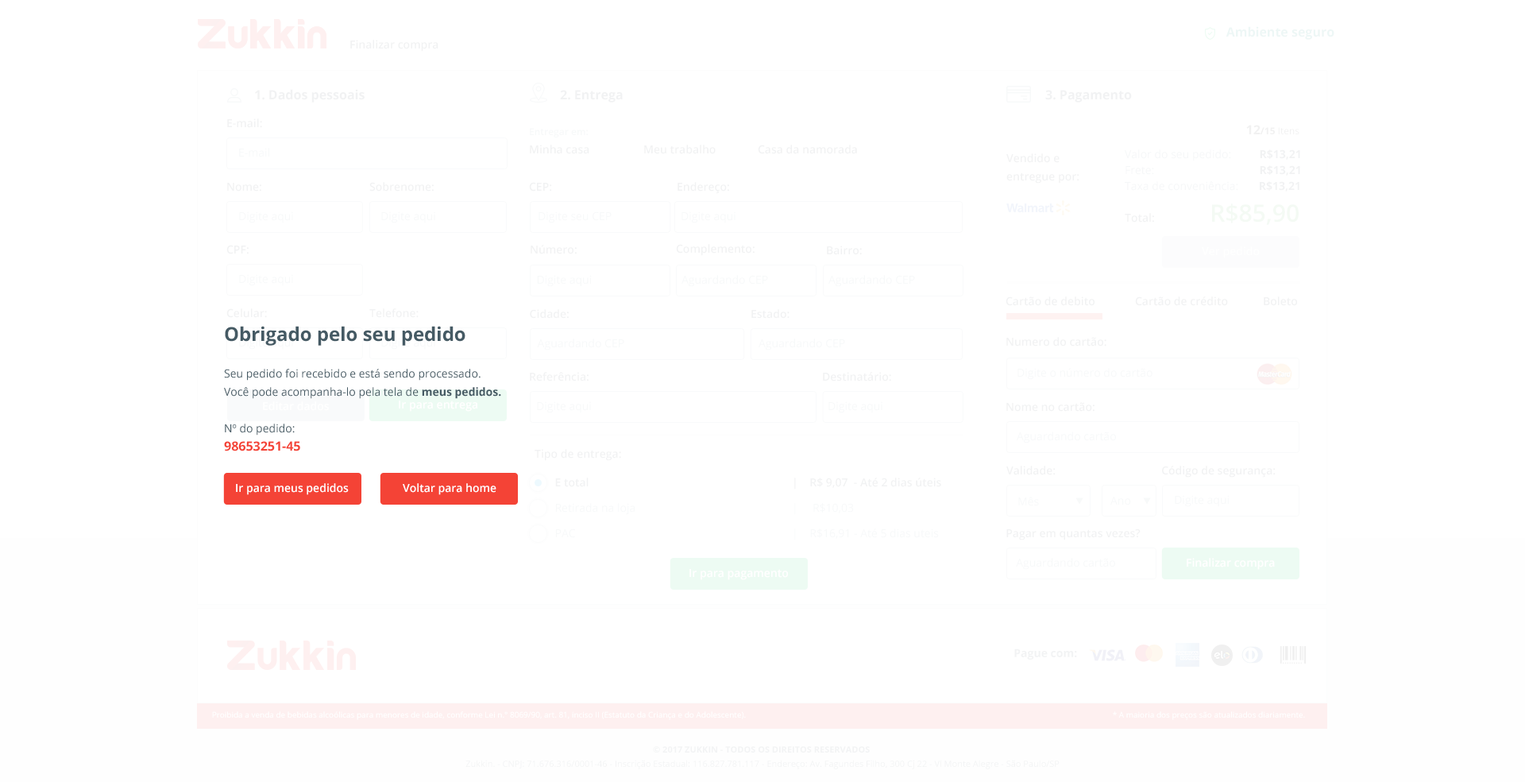
<style>
.page{position:relative;width:1525px;height:782px;background:#ffffff}
.page>*{position:absolute;margin:0}
.t1{font:12.7px "OpenSans-Bold";color:#edf7f6}
.t2{font:11.1px "OpenSans-Semibold";color:#f1f2f3}
.t3{font:12.7px "OpenSans-Bold";color:#f1f2f3}
.t4{font:11.1px/15.9px "OpenSans";color:#f4faf4}
.t5{font:12.7px/25.4px "OpenSans-Bold";color:#f4faf4}
.t6{font:9.5px/25.4px "OpenSans-Bold";color:#f4faf4}
.t7{font:9.5px/25.4px "OpenSans";color:#f4faf4}
.t8{font:11.1px/23.8px "OpenSans";color:#f4faf4}
.t9{font:11.1px/23.8px "OpenSans-Bold";color:#f4faf4}
.t10{font:11.1px/15.9px "OpenSans-Bold";color:#f4faf4}
.t11{font:11.1px/15.9px "OpenSans-Semibold";color:#f4faf4}
.t12{font:23.8px/31.8px "OpenSans-Semibold";color:#f4faf4}
.t13{font:11.1px/18.3px "OpenSans-Semibold";color:#f1f2f3}
.t14{font:9.5px/18.3px "OpenSans-Semibold";color:#f1f2f3}
.t15{font:11.1px "OpenSans";color:#f7f9f9}
.t16{font:11.1px/18.3px "OpenSans";color:#455a64}
.t17{font:19.1px/18.3px "OpenSans-Bold";color:#455a64}
.t18{font:11.1px/18.3px "OpenSans-Bold";color:#455a64}
.t19{font:12.7px/18.3px "OpenSans-Bold";color:#f44336}
.t20{font:11.1px "OpenSans-Semibold";color:#ffffff}
.t21{font:11.1px "OpenSans-Bold";color:#f2f3f4}
.t22{font:7.9px "OpenSans";color:#ffffff}
.t23{font:8.7px/14.3px "OpenSans";color:#f2f3f4}
.t24{font:8.7px/14.3px "OpenSans-Bold";color:#f2f3f4}
</style>
<div class="page">
<p class="t1" style="left:1226px;top:26px;width:109px;height:14px">Ambiente seguro</p>
<p class="t2" style="left:350px;top:40px;width:89px;height:12px">Finalizar compra</p>
<p class="t3" style="left:255px;top:89px;width:110px;height:13px">1. Dados pessoais</p>
<p class="t3" style="left:560px;top:90px;width:63px;height:12px">2. Entrega</p>
<p class="t3" style="left:1046px;top:90px;width:86px;height:12px">3. Pagamento</p>
<p class="t2" style="left:227px;top:118px;width:35px;height:10px">E-mail:</p>
<p class="t4" style="left:1125px;top:125px;width:176px;height:100px;text-align:justify"><span class="t5">12</span><span class="t6">/15</span><span class="t7"> Itens<br></span><span class="t8">Valor do seu pedido:        </span><span class="t9">R$13,21<br></span>Frete:          <span class="t10"> R$13,21<br></span>Taxa de conveniência:      <span class="t10"> R$13,21<br></span><span class="t11">Total: </span><span class="t12">R$85,90</span></p>
<p class="t13" style="left:530px;top:128px;width:327px;height:26px"><span class="t14">Entregar em:<br></span>Minha casa  Meu trabalho  Casa da namorada</p>
<p class="t15" style="left:239px;top:148px;width:30px;height:9px">E-mail</p>
<p class="t13" style="left:1007px;top:153px;width:73px;height:31px">Vendido e<br>entregue por:</p>
<p class="t2" style="left:227px;top:183px;width:34px;height:8px">Nome:</p>
<p class="t2" style="left:369px;top:182px;width:65px;height:9px">Sobrenome:</p>
<p class="t2" style="left:529px;top:182px;width:23px;height:9px">CEP:</p>
<p class="t2" style="left:678px;top:182px;width:51px;height:12px">Endereço:</p>
<p class="t15" style="left:239px;top:211px;width:54px;height:12px">Digite aqui</p>
<p class="t15" style="left:381px;top:211px;width:54px;height:12px">Digite aqui</p>
<p class="t15" style="left:539px;top:211px;width:73px;height:12px">Digite seu CEP</p>
<p class="t15" style="left:682px;top:211px;width:54px;height:12px">Digite aqui</p>
<p class="t2" style="left:226px;top:245px;width:23px;height:9px">CPF:</p>
<p class="t2" style="left:531px;top:245px;width:46px;height:9px">Número:</p>
<p class="t2" style="left:676px;top:244px;width:79px;height:12px">Complemento:</p>
<p class="t2" style="left:827px;top:245px;width:35px;height:10px">Bairro:</p>
<p class="t15" style="left:239px;top:274px;width:54px;height:12px">Digite aqui</p>
<p class="t15" style="left:537px;top:275px;width:55px;height:12px">Digite aqui</p>
<p class="t15" style="left:682px;top:275px;width:86px;height:12px">Aguardando CEP</p>
<p class="t15" style="left:829px;top:275px;width:86px;height:12px">Aguardando CEP</p>
<p class="t2" style="left:1006px;top:296px;width:89px;height:10px">Cartão de debito</p>
<p class="t2" style="left:1135px;top:296px;width:93px;height:10px">Cartão de crédito</p>
<p class="t2" style="left:1264px;top:296px;width:33px;height:10px">Boleto</p>
<p class="t2" style="left:226px;top:308px;width:41px;height:10px">Celular:</p>
<p class="t2" style="left:369px;top:308px;width:50px;height:10px">Telefone:</p>
<p class="t2" style="left:530px;top:309px;width:39px;height:10px">Cidade:</p>
<p class="t2" style="left:752px;top:309px;width:38px;height:10px">Estado:</p>
<p class="t16" style="left:224px;top:326px;width:277px;height:125px"><span class="t17">Obrigado pelo seu pedido<br><br></span>Seu pedido foi recebido e está sendo processado.<br>Você pode acompanha-lo pela tela de <span class="t18">meus pedidos.<br></span><br>Nº do pedido:<br><span class="t19">98653251-45</span></p>
<p class="t15" style="left:537px;top:338px;width:87px;height:12px">Aguardando CEP</p>
<p class="t15" style="left:759px;top:338px;width:86px;height:12px">Aguardando CEP</p>
<p class="t2" style="left:1007px;top:337px;width:100px;height:9px">Numero do cartão:</p>
<p class="t2" style="left:530px;top:372px;width:59px;height:9px">Referência:</p>
<p class="t2" style="left:823px;top:372px;width:68px;height:9px">Destinatário:</p>
<p class="t15" style="left:1018px;top:368px;width:135px;height:12px">Digite o número do cartão</p>
<p class="t20" style="left:263px;top:401px;width:66px;height:10px">Editar dados</p>
<p class="t20" style="left:399px;top:400px;width:78px;height:12px">Ir para entrega</p>
<p class="t15" style="left:537px;top:401px;width:54px;height:12px">Digite aqui</p>
<p class="t15" style="left:829px;top:401px;width:54px;height:12px">Digite aqui</p>
<p class="t2" style="left:1007px;top:402px;width:88px;height:10px">Nome no cartão:</p>
<p class="t15" style="left:1017px;top:431px;width:99px;height:12px">Aguardando cartão</p>
<p class="t2" style="left:1007px;top:466px;width:49px;height:9px">Validade:</p>
<p class="t2" style="left:1162px;top:466px;width:114px;height:11px">Código de segurança:</p>
<p class="t20" style="left:236px;top:483px;width:113px;height:12px">Ir para meus pedidos</p>
<p class="t20" style="left:403px;top:483px;width:94px;height:12px">Voltar para home</p>
<p class="t15" style="left:1018px;top:497px;width:21px;height:9px">Mês</p>
<p class="t15" style="left:1111px;top:497px;width:20px;height:8px">Ano</p>
<p class="t15" style="left:1175px;top:495px;width:54px;height:12px">Digite aqui</p>
<p class="t2" style="left:1007px;top:528px;width:134px;height:12px">Pagar em quantas vezes?</p>
<p class="t15" style="left:1016px;top:558px;width:99px;height:12px">Aguardando cartão</p>
<p class="t20" style="left:1187px;top:558px;width:88px;height:12px">Finalizar compra</p>
<p class="t20" style="left:690px;top:569px;width:98px;height:11px">Ir para pagamento</p>
<p class="t21" style="left:1015px;top:648px;width:62px;height:11px">Pague com:</p>
<p class="t22" style="left:212px;top:711px;width:534px;height:9px">Proibida a venda de bebidas alcoólicas para menores de idade, conforme Lei n.° 8069/90, art. 81, inciso II (Estatuto da Criança e do Adolescente).</p>
<p class="t22" style="left:1113px;top:711px;width:192px;height:9px">* A maioria dos preços são atualizados diariamente.</p>
<p class="t23" style="left:466px;top:746px;width:594px;height:23px;text-align:center"><span class="t24">© 2017 ZUKKIN - TODOS OS DIREITOS RESERVADOS <br></span>Zukkin. - CNPJ: 71.676.316/0001-46 - Inscrição Estadual: 116.827.781.117 - Endereço: Av. Fagundes Filho, 300 Cj 22 - Vl Monte Alegre - São Paulo/SP</p>
</div>
